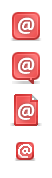
<style>
.page{position:relative;width:52px;height:178px;background:#ffffff}
.page>*{position:absolute;margin:0}
.t1{font:18px "InfoOTText-Regular";color:#ffffff;font-weight:bold;scale:1.17 1}
</style>
<div class="page">
<p class="t1" style="left:18px;top:17px;width:17px;height:17px">@</p>
</div>
